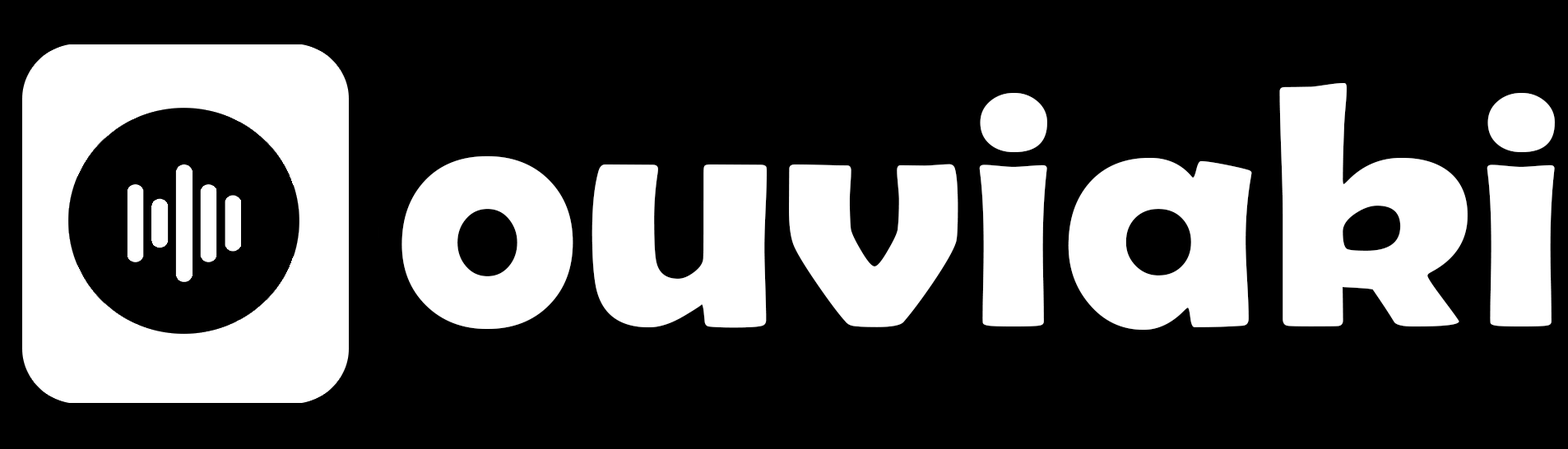
<style>
.page{position:relative;width:1568px;height:449px;background:#000000}
.page>*{position:absolute;margin:0}
.t1{font:346.3px "BerlinSansFBDemi-Bold";color:#ffffff}
</style>
<div class="page">
<p class="t1" style="left:401px;top:83px;width:1154px;height:247px">ouviaki</p>
</div>
